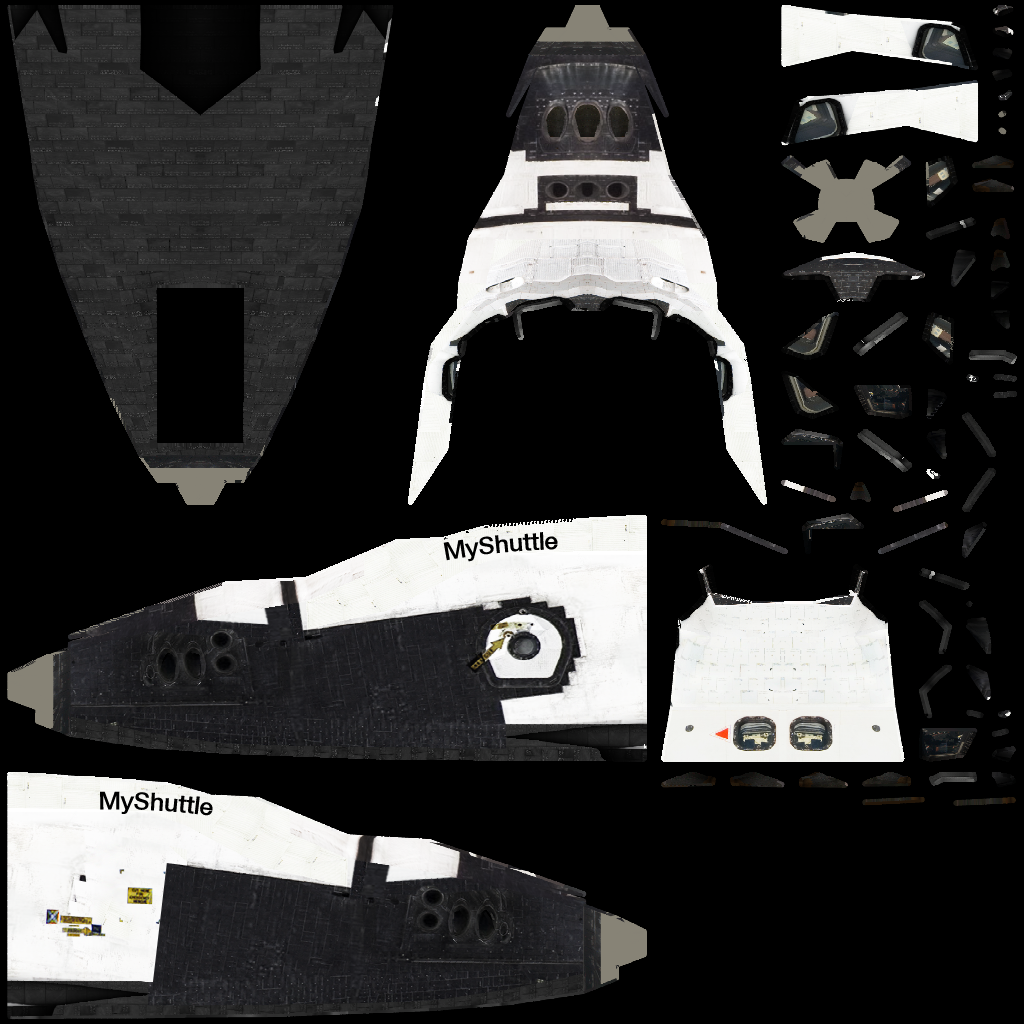
<style>
.page{position:relative;width:1024px;height:1024px;background:#000000}
.page>*{position:absolute;margin:0}
.t1{font:25px "HelveticaNeue-Medium";letter-spacing:-0.02em;color:#000000}
</style>
<div class="page">
<p class="t1" style="left:443px;top:532px;width:115px;height:30px;rotate:-6deg">MyShuttle</p>
<p class="t1" style="left:100px;top:791px;width:113px;height:25px;rotate:3deg">MyShuttle</p>
</div>
